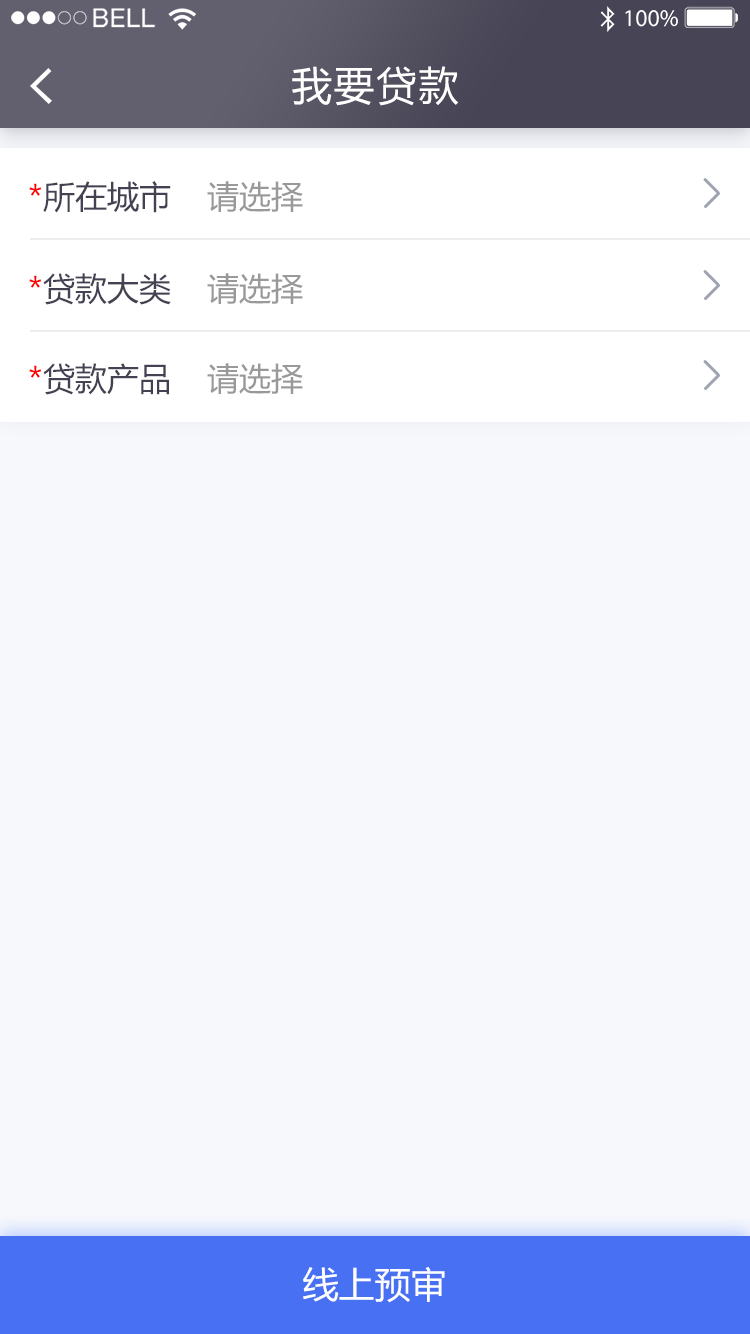
<style>
.page{position:relative;width:750px;height:1334px;background:#f7f8fc}
.page>*{position:absolute;margin:0}
.t1{font:40px "MicrosoftYaHei";letter-spacing:0.06em;color:#ffffff}
.t2{font:32px "MicrosoftYaHei";color:#444152}
.t3{font:32px "MicrosoftYaHei";color:#ff0000}
.t4{font:32px "MicrosoftYaHei";color:#999999}
.t5{font:36px "MicrosoftYaHei";color:#ffffff}
</style>
<div class="page">
<p class="t1" style="left:292px;top:66px;width:167px;height:40px">我要贷款</p>
<p class="t2" style="left:29px;top:181px;width:142px;height:32px"><span class="t3">*</span>所在城市</p>
<p class="t4" style="left:207px;top:181px;width:96px;height:31px">请选择</p>
<p class="t2" style="left:29px;top:273px;width:142px;height:32px"><span class="t3">*</span>贷款大类</p>
<p class="t4" style="left:207px;top:273px;width:96px;height:31px">请选择</p>
<p class="t2" style="left:29px;top:363px;width:140px;height:32px"><span class="t3">*</span>贷款产品</p>
<p class="t4" style="left:207px;top:363px;width:96px;height:31px">请选择</p>
<p class="t5" style="left:303px;top:1266px;width:142px;height:37px">线上预审</p>
</div>
